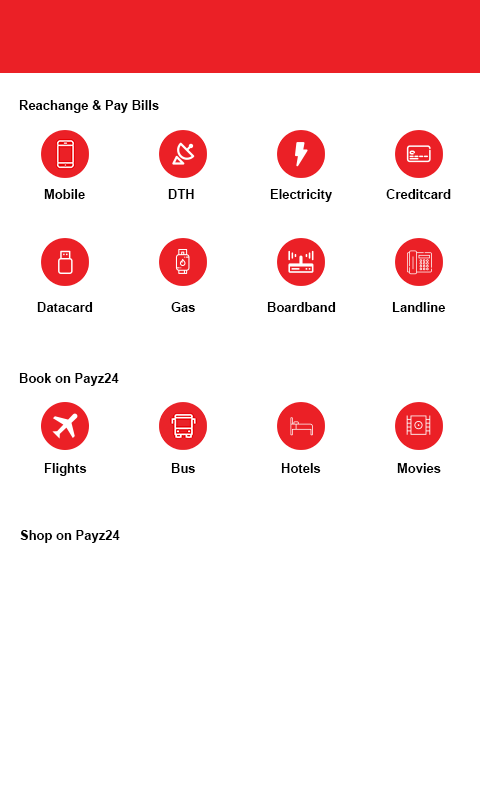
<style>
.page{position:relative;width:480px;height:800px;background:#ffffff}
.page>*{position:absolute;margin:0}
.t1{font:13px "Arial-BoldMT";color:#000000}
</style>
<div class="page">
<p class="t1" style="left:19px;top:100px;width:140px;height:13px">Reachange &amp; Pay Bills</p>
<p class="t1" style="left:44px;top:189px;width:41px;height:10px">Mobile</p>
<p class="t1" style="left:168px;top:189px;width:26px;height:10px">DTH</p>
<p class="t1" style="left:270px;top:189px;width:62px;height:13px">Electricity</p>
<p class="t1" style="left:386px;top:189px;width:65px;height:10px">Creditcard</p>
<p class="t1" style="left:37px;top:302px;width:56px;height:10px">Datacard</p>
<p class="t1" style="left:171px;top:302px;width:24px;height:10px">Gas</p>
<p class="t1" style="left:267px;top:302px;width:69px;height:10px">Boardband</p>
<p class="t1" style="left:392px;top:302px;width:54px;height:10px">Landline</p>
<p class="t1" style="left:19px;top:373px;width:100px;height:13px">Book on Payz24</p>
<p class="t1" style="left:44px;top:463px;width:43px;height:13px">Flights</p>
<p class="t1" style="left:171px;top:463px;width:24px;height:10px">Bus</p>
<p class="t1" style="left:281px;top:463px;width:40px;height:10px">Hotels</p>
<p class="t1" style="left:397px;top:463px;width:44px;height:10px">Movies</p>
<p class="t1" style="left:20px;top:530px;width:100px;height:13px">Shop on Payz24</p>
</div>
